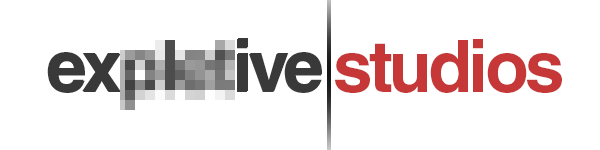
<style>
.page{position:relative;width:600px;height:150px;background:#ffffff}
.page>*{position:absolute;margin:0}
.t1{font:72px "HelveticaLTStd-Bold";letter-spacing:-0.05em;color:#393939}
.t2{font:72px "HelveticaLTStd-Bold";letter-spacing:-0.05em;color:#c63838}
</style>
<div class="page">
<p class="t1" style="left:47px;top:38px;width:275px;height:54px">ex       ive</p>
<p class="t2" style="left:335px;top:39px;width:227px;height:54px">studios</p>
</div>
